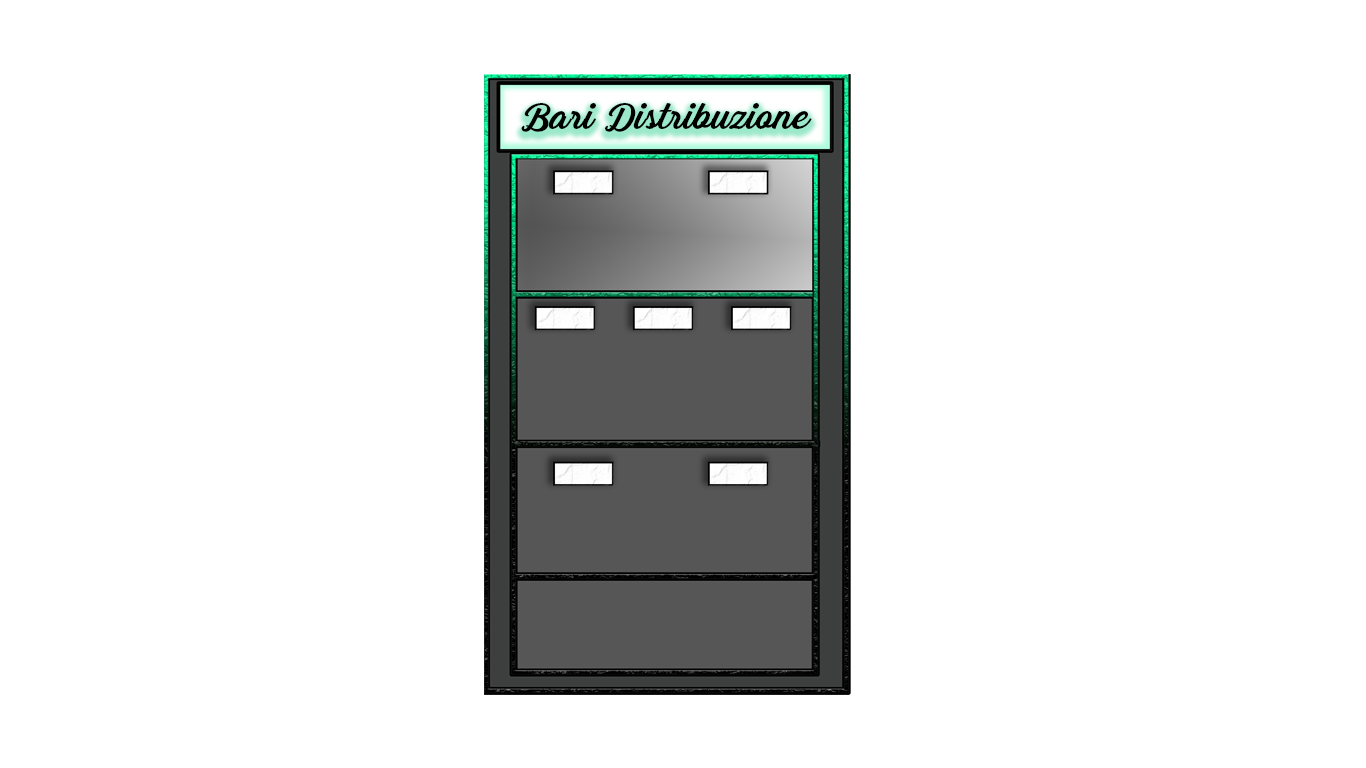
<style>
.page{position:relative;width:1366px;height:768px;background:#ffffff}
.page>*{position:absolute;margin:0}
.t1{font:38.9px "GrandAventure";color:#000000}
</style>
<div class="page">
<p class="t1" style="left:521px;top:103px;width:291px;height:29px">Bari Distribuzione</p>
</div>
